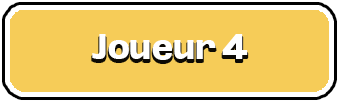
<style>
.page{position:relative;width:339px;height:102px;background:#f6cc58}
.page>*{position:absolute;margin:0}
.t1{font:33.8px "Oddlini-ExtraBold";color:#ffffff}
</style>
<div class="page">
<p class="t1" style="left:92px;top:34px;width:156px;height:26px">Joueur 4</p>
</div>
